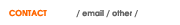
<style>
.page{position:relative;width:180px;height:25px;background:#ffffff}
.page>*{position:absolute;margin:0}
.t1{font:8px "Atlanta-Demi";color:#ff6600}
.t2{font:8px "Atlanta-Demi";color:#666666}
</style>
<div class="page">
<p class="t1" style="left:9px;top:9px;width:38px;height:8px">CONTACT</p>
<p class="t2" style="left:76px;top:10px;width:62px;height:8px"><span class="t1"> </span>/ email / other /</p>
</div>
